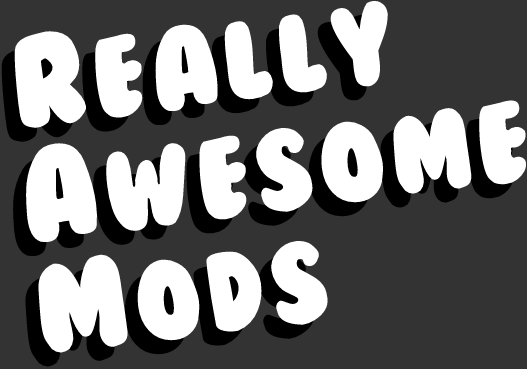
<style>
.page{position:relative;width:527px;height:369px;background:#333333}
.page>*{position:absolute;margin:0}
.t1{font:105px "BubbleGum";color:#ffffff}
.t2{font:120px "BubbleGum";color:#ffffff}
</style>
<div class="page">
<p class="t1" style="left:14px;top:0px;width:513px;height:354px;rotate:-7deg"><span class="t2">R </span>e a l l y<br><span class="t2">A </span>w e s o m e<br><span class="t2">M </span>o d s</p>
</div>
